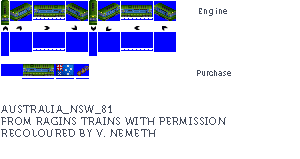
<style>
.page{position:relative;width:300px;height:159px;background:#ffffff}
.page>*{position:absolute;margin:0}
.t1{font:8px "Museo700-Regular";letter-spacing:0.075em;color:#444c5c}
.t2{font:8px "Museo700-Regular";color:#444c5c}
.t3{font:10px "Museo700-Regular";letter-spacing:0.075em;color:#444c5c;text-transform:uppercase}
</style>
<div class="page">
<p class="t1" style="left:199px;top:8px;width:28px;height:8px">Engine</p>
<p class="t2" style="left:197px;top:70px;width:34px;height:6px">Purchase</p>
<p class="t3" style="left:1px;top:105px;width:225px;height:32px">Australia_NSW_81<br>from ragins trains with permission<br>RECOLOURED BY v. nemeth</p>
</div>
